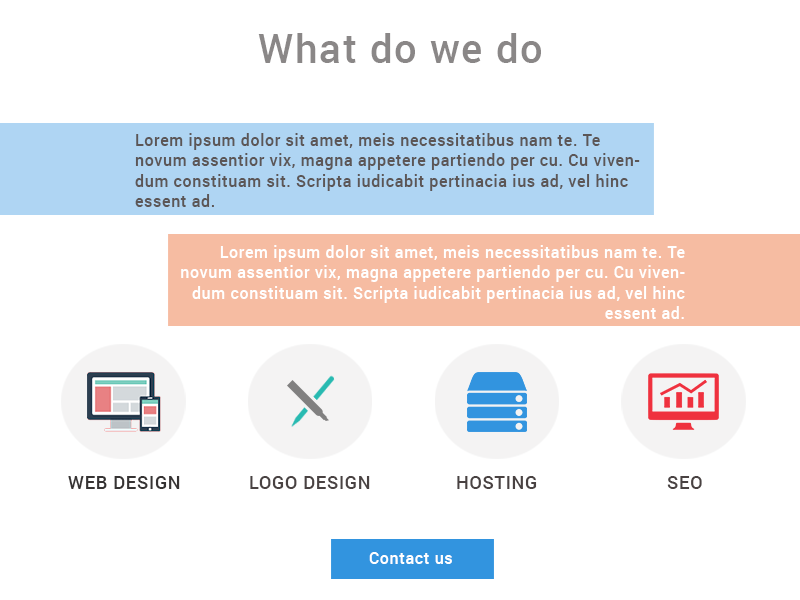
<style>
.page{position:relative;width:800px;height:600px;background:#ffffff}
.page>*{position:absolute;margin:0}
.t1{font:40px "Roboto-Medium";letter-spacing:0.04em;color:#8a8787}
.t2{font:16px/20.2px "Roboto-Medium";letter-spacing:0.04em;color:#5c5656}
.t3{font:16px/20.2px "Roboto-Medium";letter-spacing:0.04em;color:#ffffff}
.t4{font:18px "Roboto-Medium";letter-spacing:0.04em;color:#363333}
.t5{font:18px "Roboto-Medium";letter-spacing:0.04em;color:#494242}
.t6{font:16px "Roboto-Medium";letter-spacing:0.04em;color:#ffffff}
</style>
<div class="page">
<p class="t1" style="left:258px;top:33px;width:283px;height:30px">What do we do</p>
<p class="t2" style="left:135px;top:133px;width:505px;height:74px">Lorem ipsum dolor sit amet, meis necessitatibus nam te. Te novum assentior vix, magna appetere partiendo per cu. Cu vivendum constituam sit. Scripta iudicabit pertinacia ius ad, vel hinc essent ad.</p>
<p class="t3" style="left:181px;top:245px;width:504px;height:74px;text-align:right">Lorem ipsum dolor sit amet, meis necessitatibus nam te. Te novum assentior vix, magna appetere partiendo per cu. Cu vivendum constituam sit. Scripta iudicabit pertinacia ius ad, vel hinc essent ad.</p>
<p class="t4" style="left:68px;top:476px;width:112px;height:13px">WEB DESIGN</p>
<p class="t5" style="left:250px;top:476px;width:120px;height:13px">LOGO DESIGN</p>
<p class="t5" style="left:457px;top:476px;width:80px;height:13px">HOSTING</p>
<p class="t5" style="left:667px;top:476px;width:35px;height:13px">SEO</p>
<p class="t6" style="left:369px;top:552px;width:83px;height:12px">Contact us</p>
</div>
